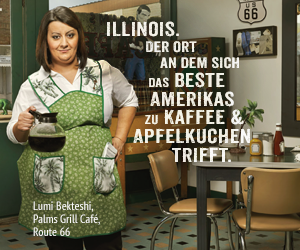
<style>
.page{position:relative;width:300px;height:250px}
.page>*{position:absolute;margin:0}
.t1{font:19.5px/18.8px "Anodyne";color:#f3f2e7;scale:1.25 1}
.t2{font:19.5px/14.3px "Anodyne";color:#f3f2e7;scale:1.25 1}
.t3{font:19.5px/17.1px "Anodyne";color:#f3f2e7;scale:1.25 1}
.t4{font:14.6px/15.9px "Anodyne";color:#f3f2e7;scale:1.25 1}
.t5{font:12.6px/18.8px "Anodyne";color:#f3f2e7;scale:1.25 1}
.t6{font:12px/13px "PTSans-Narrow";color:#fbfaf9}
.t7{font:12px/9px "PTSans-Narrow";color:#fbfaf9}
</style>
<div class="page">
<p class="t1" style="left:107px;top:21px;width:143px;height:141px;text-align:right"><span class="t2">         </span><span class="t3">illinois.<br></span><span class="t4">Der Ort     <br></span><span class="t4">           an dem sich<br>    </span><span class="t5">das</span> Beste<br>      Amerikas <br>       <span class="t5">zu</span> Kaffee &amp; <br>      Apfelkuchen <br>         trifft.</p>
<p class="t1" style="left:107px;top:21px;width:143px;height:141px;text-align:right"><span class="t2">         </span><span class="t3">illinois.<br></span><span class="t4">Der Ort     <br></span><span class="t4">           an dem sich<br>    </span><span class="t5">das</span> Beste<br>      Amerikas <br>       <span class="t5">zu</span> Kaffee &amp; <br>      Apfelkuchen <br>         trifft.</p>
<p class="t6" style="left:33px;top:201px;width:67px;height:35px"><span class="t7">Lumi Bekteshi, <br></span>Palms Grill Café,<br>Route 66</p>
</div>
